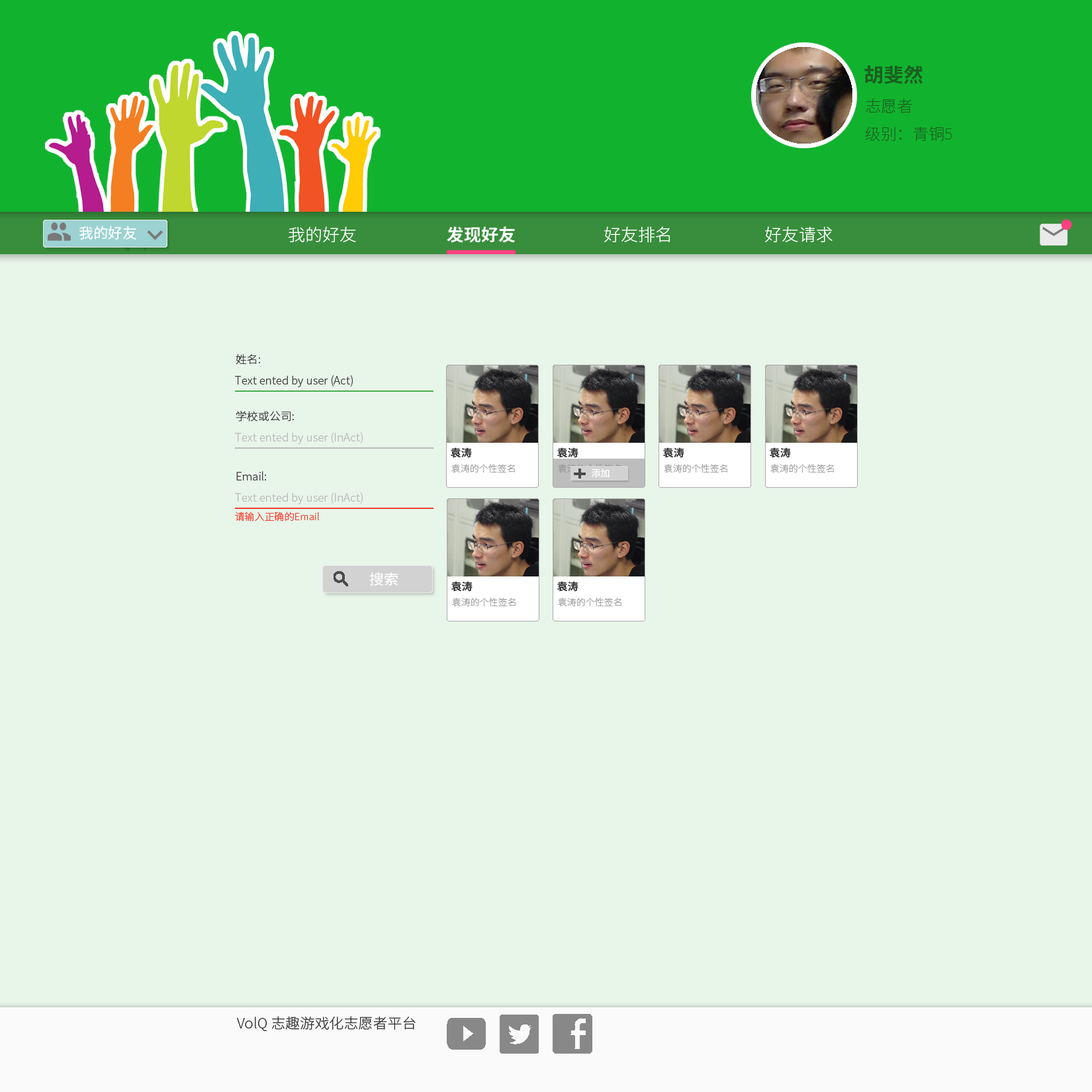
<style>
.page{position:relative;width:1092px;height:1092px;background:#e8f5e9}
.page>*{position:absolute;margin:0}
.t1{font:19.5px "NotoSansCJKsc-Bold";color:#1b5e20}
.t2{font:15.6px "NotoSansCJKsc-Thin";color:#1b5e20}
.t3{font:14.3px "NotoSansCJKsc-Regular";color:#ffffff}
.t4{font:16.9px "NotoSansCJKsc-Light";color:#ffffff}
.t5{font:16.9px "NotoSansCJKsc-Bold";color:#ffffff}
.t6{font:11px "NotoSansCJKsc-Light";color:#414141}
.t7{font:11px "NotoSansCJKsc-Light";color:#bababa}
.t8{font:9.7px "NotoSansCJKsc-Light";color:#f44336}
.t9{font:14.3px "NotoSansCJKsc-Light";color:#353535}
</style>
<div class="page">
<p class="t1" style="left:864px;top:65px;width:59px;height:19px">胡斐然</p>
<p class="t2" style="left:865px;top:99px;width:87px;height:42px">志愿者<br>级别：青铜5</p>
<p class="t3" style="left:79px;top:226px;width:57px;height:14px">我的好友</p>
<p class="t4" style="left:289px;top:226px;width:67px;height:16px">我的好友</p>
<p class="t5" style="left:447px;top:226px;width:68px;height:17px">发现好友</p>
<p class="t4" style="left:604px;top:226px;width:66px;height:17px">好友排名</p>
<p class="t4" style="left:765px;top:226px;width:68px;height:16px">好友请求</p>
<p class="t6" style="left:236px;top:353px;width:24px;height:12px">姓名:</p>
<p class="t6" style="left:235px;top:375px;width:118px;height:12px">Text ented by user (Act)</p>
<p class="t6" style="left:236px;top:411px;width:58px;height:11px">学校或公司:</p>
<p class="t7" style="left:235px;top:432px;width:128px;height:12px">Text ented by user (InAct)</p>
<p class="t6" style="left:236px;top:471px;width:30px;height:9px">Email:</p>
<p class="t7" style="left:235px;top:492px;width:128px;height:12px">Text ented by user (InAct)</p>
<p class="t8" style="left:235px;top:512px;width:84px;height:10px">请输入正确的Email</p>
<p class="t9" style="left:237px;top:1016px;width:179px;height:15px">VolQ 志趣游戏化志愿者平台</p>
</div>
